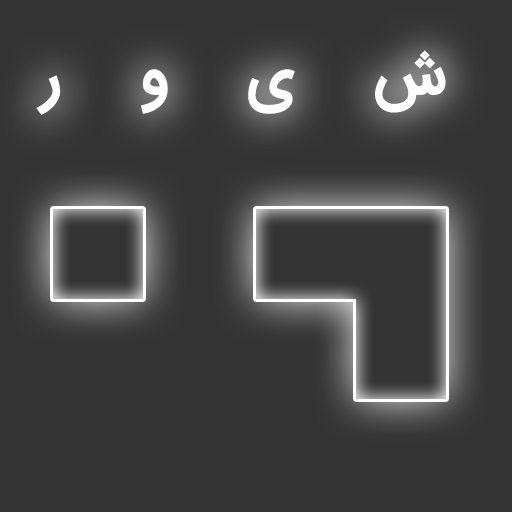
<style>
.page{position:relative;width:512px;height:512px;background:#333333}
.page>*{position:absolute;margin:0}
.t1{font:54.3px "IRANSans-Bold";color:#ffffff}
</style>
<div class="page">
<p class="t1" style="left:36px;top:50px;width:410px;height:65px">ش     ی     و     ر</p>
</div>
